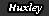
<style>
.page{position:relative;width:49px;height:16px;background:#333333}
.page>*{position:absolute;margin:0}
.t1{font:14px "Vijaya-Bold";color:#ffffff}
</style>
<div class="page">
<p class="t1" style="left:9px;top:3px;width:33px;height:11px">Huxley</p>
</div>
